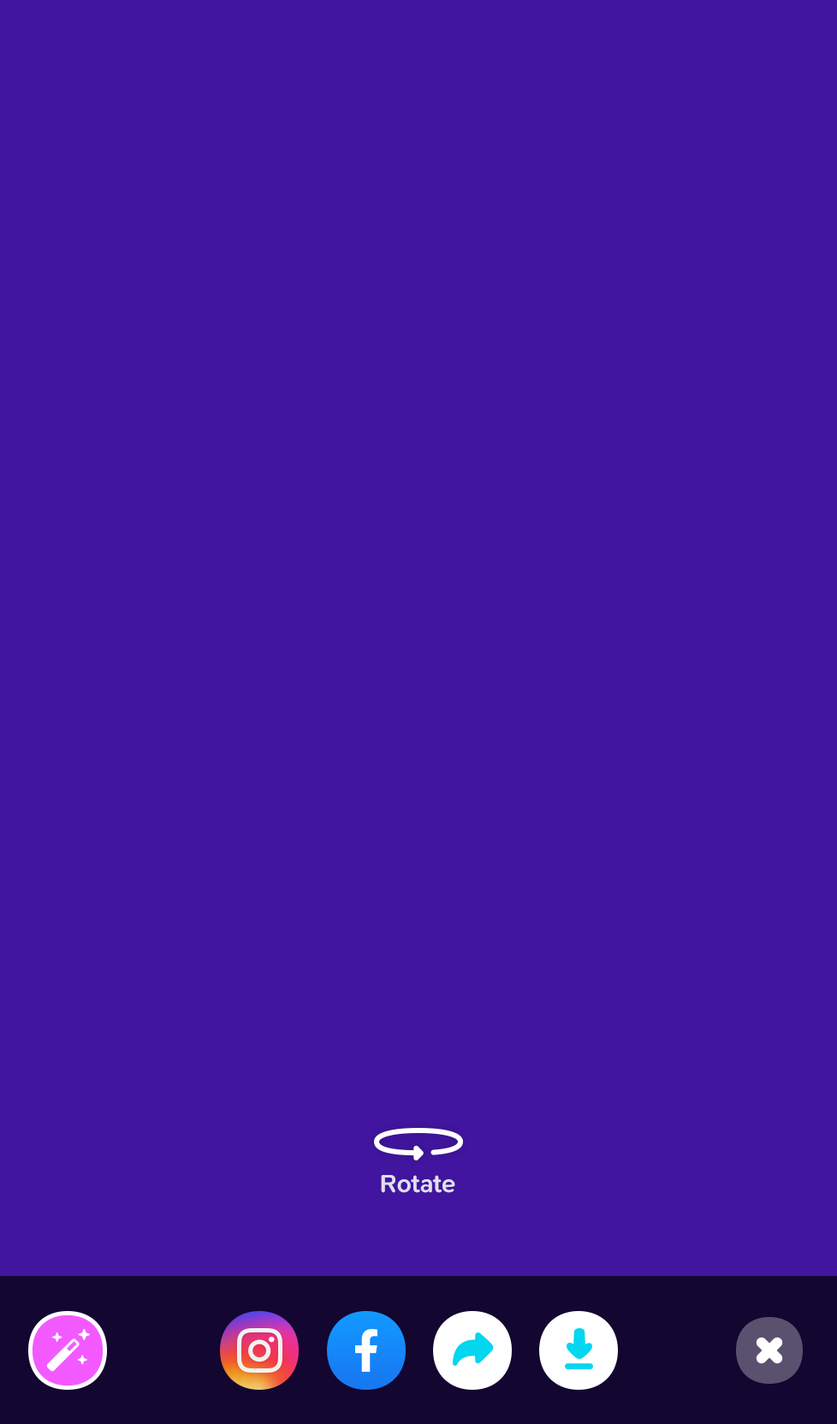
<style>
.page{position:relative;width:837px;height:1424px;background:#4115a0}
.page>*{position:absolute;margin:0}
.t1{font:25.7px "SNPro-SemiBold";letter-spacing:-0.01em;color:#e2deee}
</style>
<div class="page">
<p class="t1" style="left:381px;top:1175px;width:74px;height:18px">Rotate</p>
</div>
